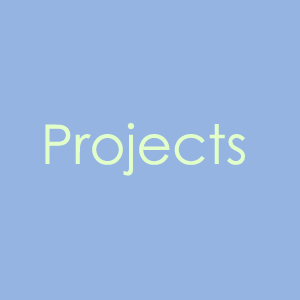
<style>
.page{position:relative;width:300px;height:300px;background:#95b4e2}
.page>*{position:absolute;margin:0}
.t1{font:54.7px "CenturyGothic";color:#e2ffc9}
</style>
<div class="page">
<p class="t1" style="left:45px;top:122px;width:200px;height:54px">Projects</p>
</div>
